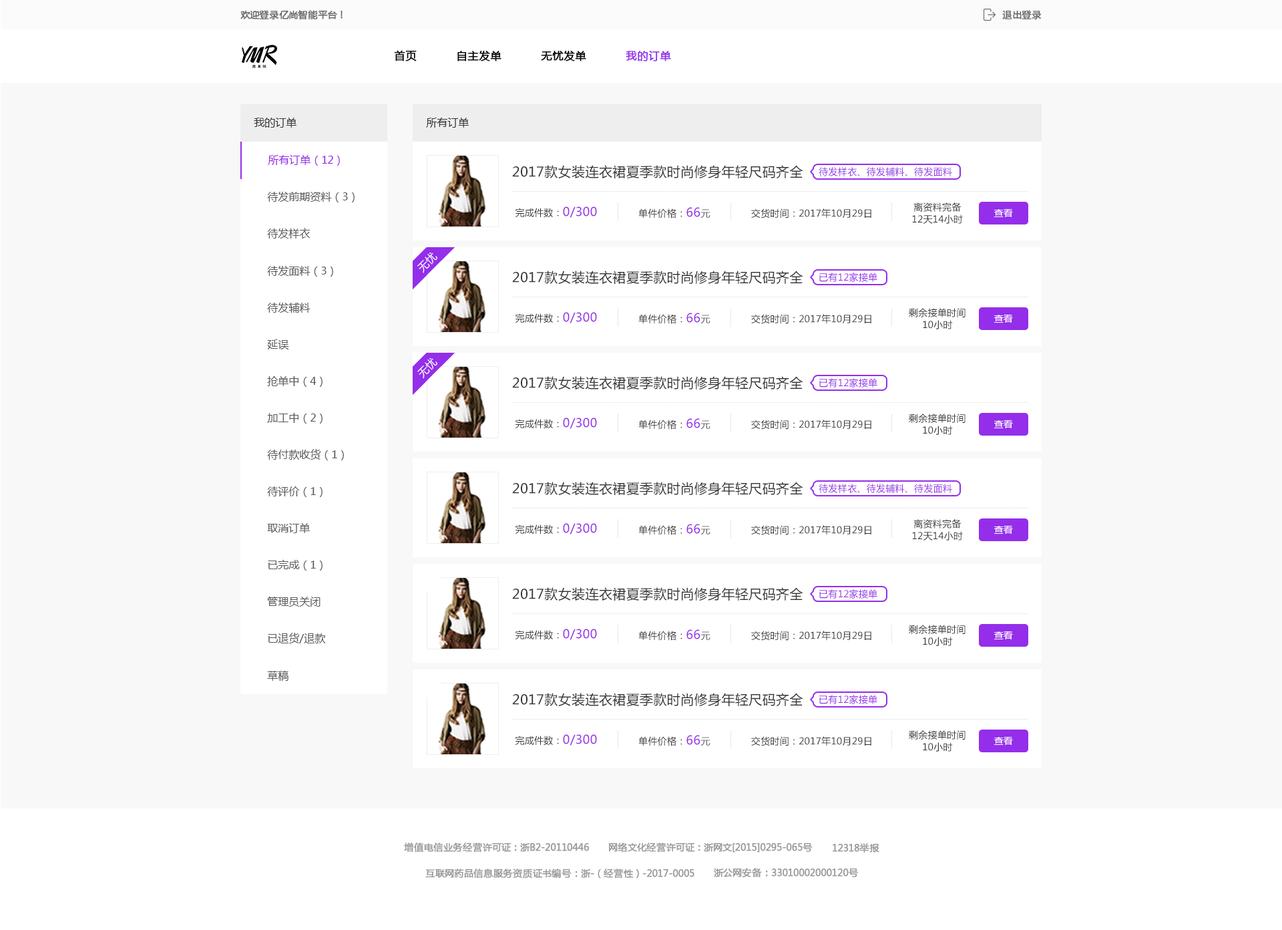
<style>
.page{position:relative;width:1282px;height:930px;background:#ffffff}
.page>*{position:absolute;margin:0}
.t1{font:9.4px "MicrosoftYaHei";color:#666666;font-weight:bold}
.t2{font:10.7px "MicrosoftYaHei";color:#000000;font-weight:bold}
.t3{font:10.7px "MicrosoftYaHei";color:#942eea;font-weight:bold}
.t4{font:10.7px "MicrosoftYaHei";color:#333333}
.t5{font:10.7px "MicrosoftYaHei";color:#942eea}
.t6{font:13.4px "MicrosoftYaHei";letter-spacing:0.02em;color:#333333}
.t7{font:9.4px "MicrosoftYaHei";letter-spacing:0.02em;color:#942eea}
.t8{font:10.7px "MicrosoftYaHei";color:#5a5a5a}
.t9{font:9.4px "MicrosoftYaHei";letter-spacing:0.02em;color:#333333}
.t10{font:12px "MicrosoftYaHei";letter-spacing:0.02em;color:#942eea}
.t11{font:9.4px "MicrosoftYaHei";letter-spacing:0.02em;color:#666666}
.t12{font:9.4px/12px "MicrosoftYaHei";letter-spacing:0.02em;color:#333333}
.t13{font:9.4px "MicrosoftYaHei";color:#ffffff}
.t14{font:10.7px "MicrosoftYaHei";letter-spacing:0.02em;color:#ffffff}
.t15{font:9.4px "MicrosoftYaHei";color:#999999;font-weight:bold}
</style>
<div class="page">
<p class="t1" style="left:240px;top:10px;width:103px;height:10px">欢迎登录亿尚智能平台！</p>
<p class="t1" style="left:1003px;top:10px;width:39px;height:10px">退出登录</p>
<p class="t2" style="left:394px;top:50px;width:23px;height:11px">首页</p>
<p class="t2" style="left:458px;top:51px;width:44px;height:10px">自主发单</p>
<p class="t2" style="left:541px;top:51px;width:45px;height:10px">无忧发单</p>
<p class="t3" style="left:626px;top:51px;width:45px;height:10px">我的订单</p>
<p class="t4" style="left:254px;top:118px;width:43px;height:10px">我的订单</p>
<p class="t4" style="left:426px;top:118px;width:43px;height:10px">所有订单</p>
<p class="t5" style="left:268px;top:155px;width:72px;height:11px">所有订单（12）</p>
<p class="t6" style="left:512px;top:165px;width:292px;height:13px">2017款女装连衣裙夏季款时尚修身年轻尺码齐全</p>
<p class="t7" style="left:819px;top:167px;width:134px;height:9px">待发样衣、待发辅料、待发面料</p>
<p class="t8" style="left:267px;top:192px;width:88px;height:10px">待发前期资料（3）</p>
<p class="t9" style="left:515px;top:206px;width:82px;height:12px">完成件数：<span class="t10">0/300</span></p>
<p class="t9" style="left:639px;top:207px;width:72px;height:11px">单件价格：<span class="t10">66</span><span class="t11">元</span></p>
<p class="t9" style="left:751px;top:208px;width:121px;height:10px">交货时间：2017年10月29日</p>
<p class="t12" style="left:912px;top:202px;width:51px;height:22px;text-align:center">离资料完备<br>12天14小时</p>
<p class="t13" style="left:995px;top:209px;width:18px;height:8px">查看</p>
<p class="t8" style="left:267px;top:228px;width:43px;height:10px">待发样衣</p>
<p class="t14" style="left:417px;top:252px;width:21px;height:21px;rotate:-45deg">无忧</p>
<p class="t8" style="left:267px;top:266px;width:66px;height:11px">待发面料（3）</p>
<p class="t6" style="left:512px;top:271px;width:292px;height:13px">2017款女装连衣裙夏季款时尚修身年轻尺码齐全</p>
<p class="t7" style="left:820px;top:273px;width:58px;height:9px">已有12家接单</p>
<p class="t8" style="left:267px;top:303px;width:44px;height:10px">待发辅料</p>
<p class="t9" style="left:515px;top:312px;width:82px;height:11px">完成件数：<span class="t10">0/300</span></p>
<p class="t9" style="left:639px;top:313px;width:72px;height:11px">单件价格：<span class="t10">66</span><span class="t11">元</span></p>
<p class="t9" style="left:751px;top:314px;width:121px;height:10px">交货时间：2017年10月29日</p>
<p class="t12" style="left:909px;top:308px;width:57px;height:21px;text-align:center">剩余接单时间<br>10小时</p>
<p class="t13" style="left:995px;top:315px;width:18px;height:8px">查看</p>
<p class="t8" style="left:267px;top:339px;width:22px;height:10px">延误</p>
<p class="t14" style="left:417px;top:358px;width:21px;height:21px;rotate:-45deg">无忧</p>
<p class="t8" style="left:267px;top:376px;width:56px;height:11px">抢单中（4）</p>
<p class="t6" style="left:512px;top:376px;width:292px;height:13px">2017款女装连衣裙夏季款时尚修身年轻尺码齐全</p>
<p class="t7" style="left:820px;top:378px;width:58px;height:9px">已有12家接单</p>
<p class="t8" style="left:267px;top:413px;width:56px;height:10px">加工中（2）</p>
<p class="t12" style="left:909px;top:413px;width:57px;height:22px;text-align:center">剩余接单时间<br>10小时</p>
<p class="t9" style="left:515px;top:417px;width:82px;height:12px">完成件数：<span class="t10">0/300</span></p>
<p class="t9" style="left:639px;top:418px;width:72px;height:11px">单件价格：<span class="t10">66</span><span class="t11">元</span></p>
<p class="t9" style="left:751px;top:419px;width:121px;height:10px">交货时间：2017年10月29日</p>
<p class="t13" style="left:995px;top:420px;width:18px;height:8px">查看</p>
<p class="t8" style="left:267px;top:449px;width:77px;height:11px">待付款收货（1）</p>
<p class="t6" style="left:512px;top:482px;width:292px;height:13px">2017款女装连衣裙夏季款时尚修身年轻尺码齐全</p>
<p class="t7" style="left:819px;top:484px;width:134px;height:9px">待发样衣、待发辅料、待发面料</p>
<p class="t8" style="left:267px;top:486px;width:56px;height:11px">待评价（1）</p>
<p class="t12" style="left:912px;top:519px;width:51px;height:21px;text-align:center">离资料完备<br>12天14小时</p>
<p class="t8" style="left:267px;top:523px;width:43px;height:10px">取消订单</p>
<p class="t9" style="left:515px;top:523px;width:82px;height:11px">完成件数：<span class="t10">0/300</span></p>
<p class="t9" style="left:639px;top:524px;width:72px;height:11px">单件价格：<span class="t10">66</span><span class="t11">元</span></p>
<p class="t9" style="left:751px;top:525px;width:121px;height:10px">交货时间：2017年10月29日</p>
<p class="t13" style="left:995px;top:526px;width:18px;height:8px">查看</p>
<p class="t8" style="left:268px;top:560px;width:55px;height:10px">已完成（1）</p>
<p class="t6" style="left:512px;top:587px;width:292px;height:13px">2017款女装连衣裙夏季款时尚修身年轻尺码齐全</p>
<p class="t7" style="left:820px;top:589px;width:58px;height:9px">已有12家接单</p>
<p class="t8" style="left:267px;top:596px;width:54px;height:11px">管理员关闭</p>
<p class="t9" style="left:515px;top:629px;width:82px;height:11px">完成件数：<span class="t10">0/300</span></p>
<p class="t9" style="left:639px;top:629px;width:72px;height:12px">单件价格：<span class="t10">66</span><span class="t11">元</span></p>
<p class="t12" style="left:909px;top:625px;width:57px;height:21px;text-align:center">剩余接单时间<br>10小时</p>
<p class="t8" style="left:268px;top:633px;width:57px;height:10px">已退货/退款</p>
<p class="t9" style="left:751px;top:631px;width:121px;height:10px">交货时间：2017年10月29日</p>
<p class="t13" style="left:995px;top:631px;width:18px;height:8px">查看</p>
<p class="t8" style="left:267px;top:671px;width:22px;height:10px">草稿</p>
<p class="t6" style="left:512px;top:693px;width:292px;height:13px">2017款女装连衣裙夏季款时尚修身年轻尺码齐全</p>
<p class="t7" style="left:820px;top:695px;width:58px;height:9px">已有12家接单</p>
<p class="t9" style="left:515px;top:734px;width:82px;height:11px">完成件数：<span class="t10">0/300</span></p>
<p class="t9" style="left:639px;top:735px;width:72px;height:11px">单件价格：<span class="t10">66</span><span class="t11">元</span></p>
<p class="t9" style="left:751px;top:736px;width:121px;height:10px">交货时间：2017年10月29日</p>
<p class="t12" style="left:909px;top:730px;width:57px;height:21px;text-align:center">剩余接单时间<br>10小时</p>
<p class="t13" style="left:995px;top:737px;width:18px;height:8px">查看</p>
<p class="t15" style="left:404px;top:842px;width:186px;height:10px">增值电信业务经营许可证：浙B2-20110446</p>
<p class="t15" style="left:609px;top:842px;width:204px;height:10px">网络文化经营许可证：浙网文[2015]0295-065号</p>
<p class="t15" style="left:833px;top:843px;width:47px;height:10px">12318举报</p>
<p class="t15" style="left:425px;top:868px;width:270px;height:10px">互联网药品信息服务资质证书编号：浙-（经营性）-2017-0005</p>
<p class="t15" style="left:714px;top:868px;width:145px;height:9px">浙公网安备：33010002000120号</p>
</div>
